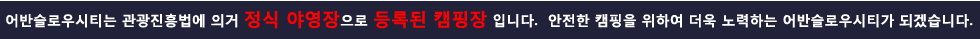
<style>
.page{position:relative;width:980px;height:39px;background:#212239}
.page>*{position:absolute;margin:0}
.t1{font:14px "MalgunGothicBold";color:#ffffff}
.t2{font:18px "MalgunGothicBold";color:#fe0000}
.t3{font:18px "MalgunGothicBold";color:#ff0000}
</style>
<div class="page">
<p class="t1" style="left:6px;top:11px;width:967px;height:18px">어반슬로우시티는 관광진흥법에 의거 <span class="t2">정식 야영장</span>으로 <span class="t3">등록된 캠핑장</span> 입니다.  안전한 캠핑을 위하여 더욱 노력하는 어반슬로우시티가 되겠습니다.</p>
</div>
